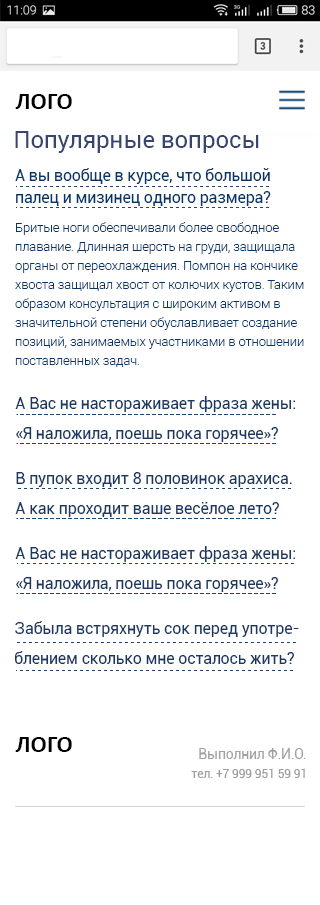
<style>
.page{position:relative;width:320px;height:905px;background:#ffffff}
.page>*{position:absolute;margin:0}
.t1{font:24px "Calibri-Bold";color:#000000}
.t2{font:24px "Roboto-Regular";color:#38466f}
.t3{font:16px/22px "Roboto-Regular";letter-spacing:-0.01em;color:#033568}
.t4{font:13px/19px "Roboto-Light";letter-spacing:-0.01em;color:#033568}
.t5{font:16px/30px "Roboto-Regular";letter-spacing:-0.01em;color:#1b3863}
.t6{font:14px "Roboto-Regular";letter-spacing:-0.01em;color:#a2a1a0}
.t7{font:12px "Roboto-Regular";letter-spacing:-0.01em;color:#9e9d9d}
</style>
<div class="page">
<p class="t1" style="left:15px;top:94px;width:57px;height:15px">ЛОГО</p>
<p class="t2" style="left:15px;top:131px;width:244px;height:22px">Популярные вопросы</p>
<p class="t3" style="left:15px;top:168px;width:256px;height:38px">А вы вообще в курсе, что большой <br>палец и мизинец одного размера?</p>
<p class="t4" style="left:15px;top:222px;width:289px;height:145px">Бритые ноги обеспечивали более свободное плавание. Длинная шерсть на груди, защищала органы от переохлаждения. Помпон на кончике хвоста защищал хвост от колючих кустов. Таким образом консультация с широким активом в значительной степени обуславливает создание позиций, занимаемых участниками в отношении поставленных задач. <br>Не следует, однако забывать, что новая модель организационной деятельности влечет за собой процесс внедрения и модернизации направлений прогрессивного развития.</p>
<p class="t5" style="left:15px;top:396px;width:281px;height:46px">А Вас не настораживает фраза жены: «Я наложила, поешь пока горячее»?</p>
<p class="t5" style="left:15px;top:472px;width:277px;height:45px">В пупок входит 8 половинок арахиса. А как проходит ваше весёлое лето?</p>
<p class="t5" style="left:15px;top:546px;width:281px;height:46px">А Вас не настораживает фраза жены: «Я наложила, поешь пока горячее»?</p>
<p class="t5" style="left:14px;top:621px;width:285px;height:43px">Забыла встряхнуть сок перед употреблением сколько мне осталось жить?</p>
<p class="t1" style="left:15px;top:737px;width:57px;height:15px">ЛОГО</p>
<p class="t6" style="left:199px;top:748px;width:107px;height:11px">Выполнил Ф.И.О.</p>
<p class="t7" style="left:191px;top:768px;width:114px;height:10px">тел. +7 999 951 59 91</p>
</div>
